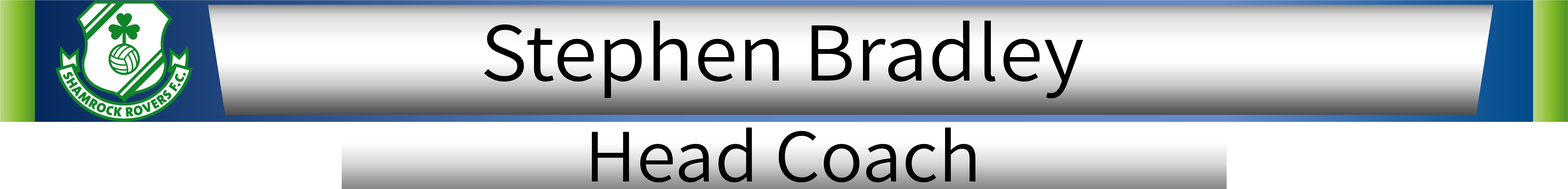
<style>
.page{position:relative;width:1568px;height:189px;background:#ffffff}
.page>*{position:absolute;margin:0}
.t1{font:83.7px "Assistant-Regular";color:#000000;scale:1.06 1}
.t2{font:75.3px "Assistant-Regular";color:#000000;scale:1.06 1}
</style>
<div class="page">
<p class="t1" style="left:484px;top:21px;width:599px;height:77px">Stephen Bradley</p>
<p class="t2" style="left:592px;top:127px;width:383px;height:55px">Head Coach</p>
</div>
